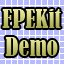
<style>
.page{position:relative;width:64px;height:64px;background:#b6baff}
.page>*{position:absolute;margin:0}
.t1{font:24px "BernardMT-Condensed"}
</style>
<div class="page">
<p class="t1" style="left:2px;top:9px;width:59px;height:19px">FPEKit</p>
<p class="t1" style="left:5px;top:37px;width:53px;height:19px">Demo</p>
</div>
